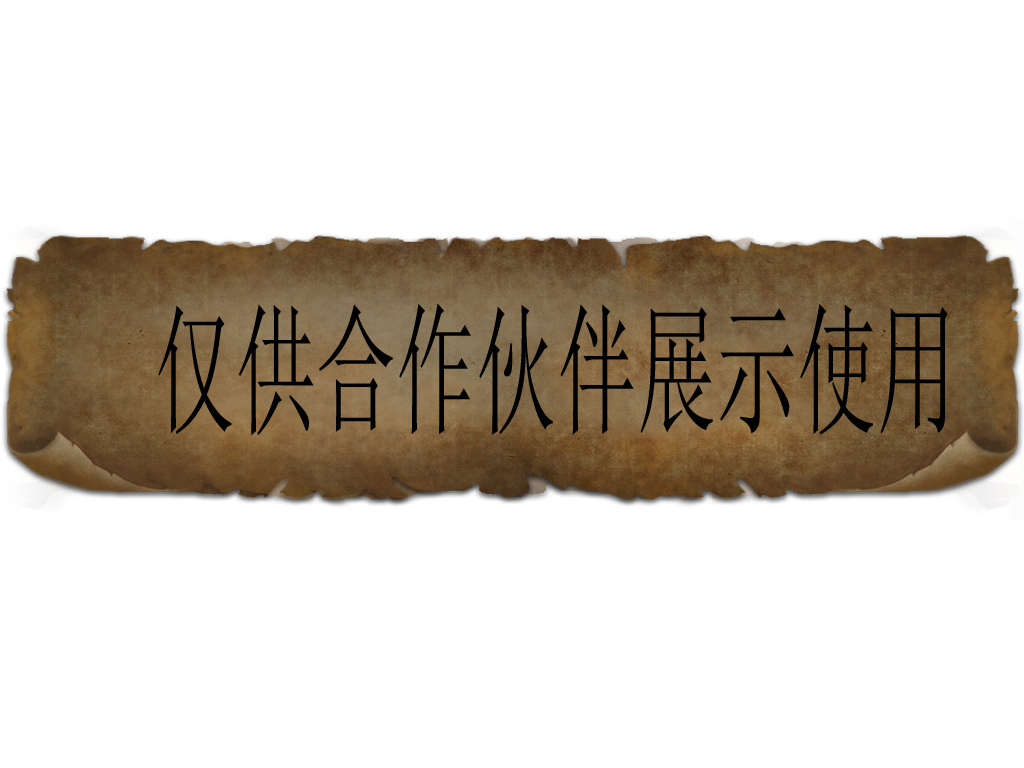
<style>
.page{position:relative;width:1024px;height:768px;background:#ffffff}
.page>*{position:absolute;margin:0}
.t1{font:141.3px "SimSun";color:#000000;scale:0.57 1}
</style>
<div class="page">
<p class="t1" style="left:156px;top:298px;width:801px;height:142px">仅供合作伙伴展示使用</p>
</div>
